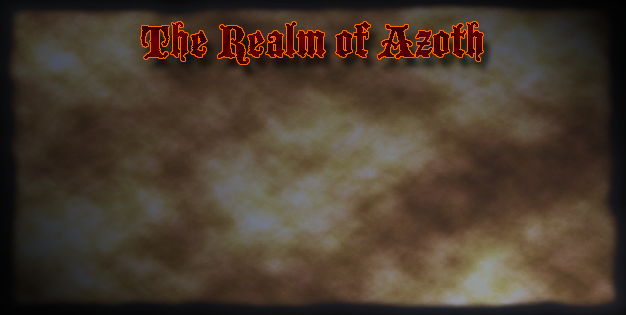
<style>
.page{position:relative;width:626px;height:315px}
.page>*{position:absolute;margin:0}
.t1{font:48px "BlackmoorLetPlain";color:#4c0000}
</style>
<div class="page">
<p class="t1" style="left:141px;top:22px;width:342px;height:42px">The Realm of Azoth</p>
</div>
